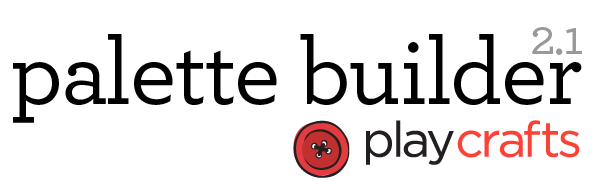
<style>
.page{position:relative;width:600px;height:186px;background:#ffffff}
.page>*{position:absolute;margin:0}
.t1{font:52px "Archer-Medium";letter-spacing:-0.025em;color:#999999}
.t2{font:96px "Archer-Medium";letter-spacing:-0.02em;color:#000000}
</style>
<div class="page">
<p class="t1" style="left:532px;top:27px;width:50px;height:28px">2.1</p>
<p class="t2" style="left:13px;top:34px;width:569px;height:89px">palette builder</p>
</div>
